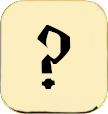
<style>
.page{position:relative;width:108px;height:114px;background:#fceebf}
.page>*{position:absolute;margin:0}
.t1{font:90.7px "HarryP";letter-spacing:0.12em;color:#000000}
</style>
<div class="page">
<p class="t1" style="left:37px;top:25px;width:34px;height:64px">?</p>
</div>
